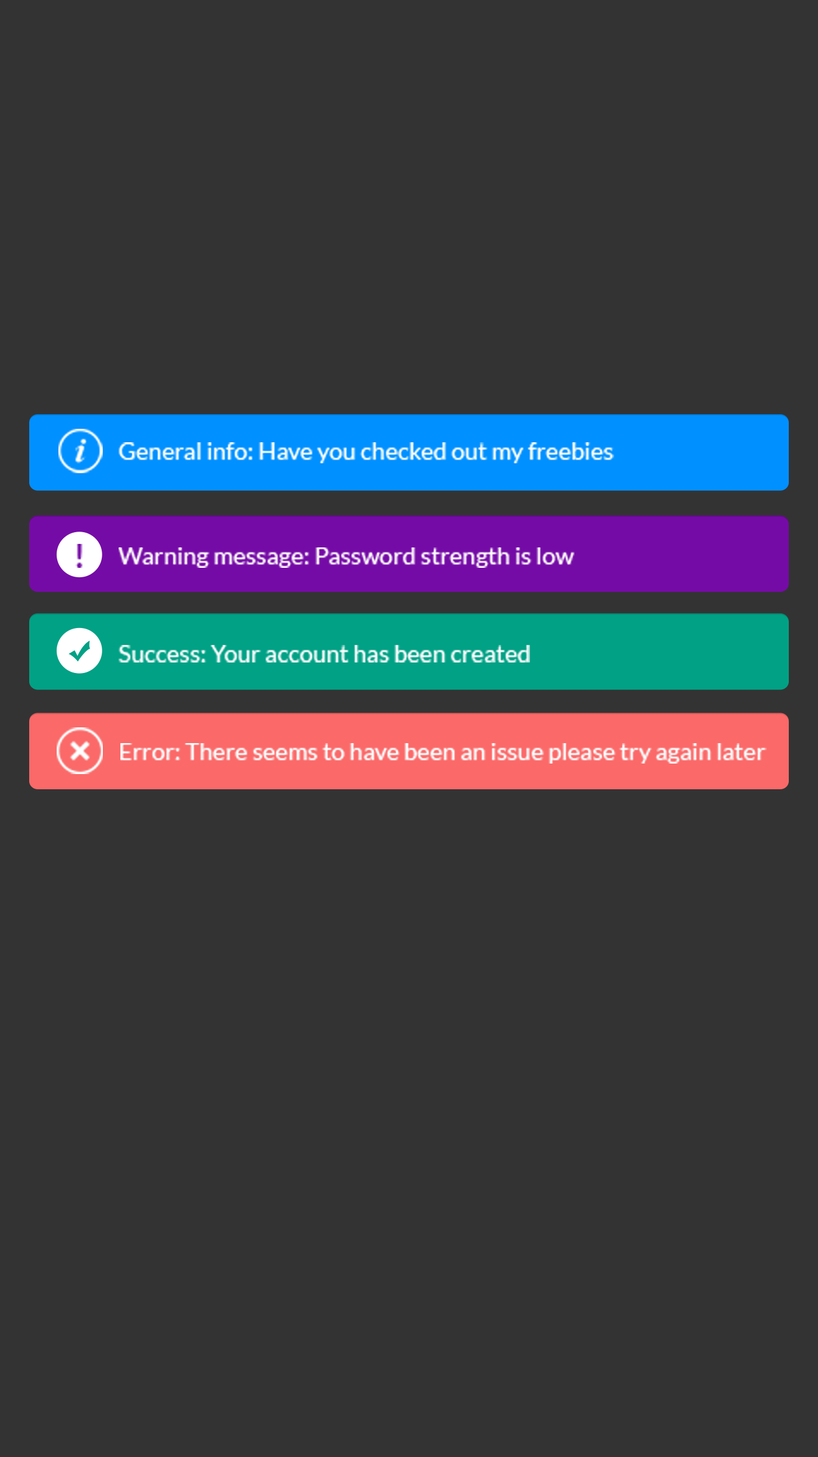
<style>
.page{position:relative;width:818px;height:1457px;background:#333333}
.page>*{position:absolute;margin:0}
.t1{font:24px "Lato-Regular";color:#ffffff}
.t2{font:30.9px "Lato-Bold";color:#750ba6}
</style>
<div class="page">
<p class="t1" style="left:119px;top:442px;width:495px;height:21px">General info: Have you checked out my freebies</p>
<p class="t2" style="left:75px;top:544px;width:7px;height:24px">!</p>
<p class="t1" style="left:119px;top:548px;width:455px;height:20px">Warning message: Password strength is low</p>
<p class="t1" style="left:119px;top:645px;width:411px;height:18px">Success: Your account has been created</p>
<p class="t1" style="left:120px;top:743px;width:647px;height:21px">Error: There seems to have been an issue please try again later</p>
</div>
